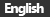
<style>
.page{position:relative;width:50px;height:17px;background:#333333}
.page>*{position:absolute;margin:0}
.t1{font:14px "KhmerUI-Bold";letter-spacing:-0.08em;color:#fefdfd}
</style>
<div class="page">
<p class="t1" style="left:5px;top:3px;width:39px;height:13px">English</p>
</div>
